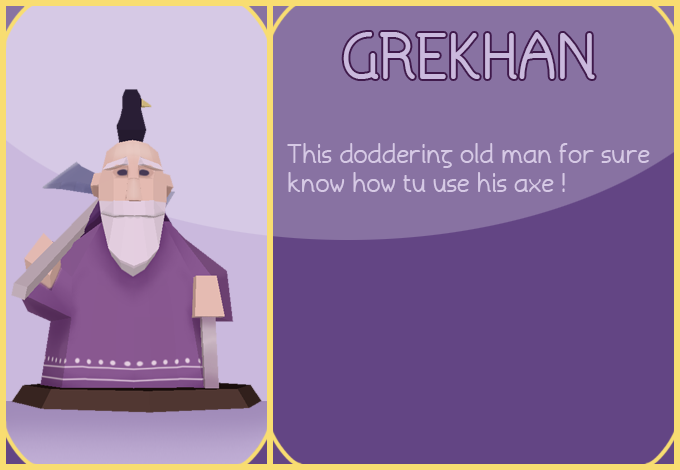
<style>
.page{position:relative;width:680px;height:470px;background:#634584}
.page>*{position:absolute;margin:0}
.t1{font:60px "Torid";color:#cab9dd}
.t2{font:24px "Torid";color:#d6c9e5}
</style>
<div class="page">
<p class="t1" style="left:343px;top:32px;width:252px;height:47px">GREKHAN</p>
<p class="t2" style="left:287px;top:143px;width:363px;height:49px">This doddering old man for sure <br>know how tu use his axe !</p>
</div>
